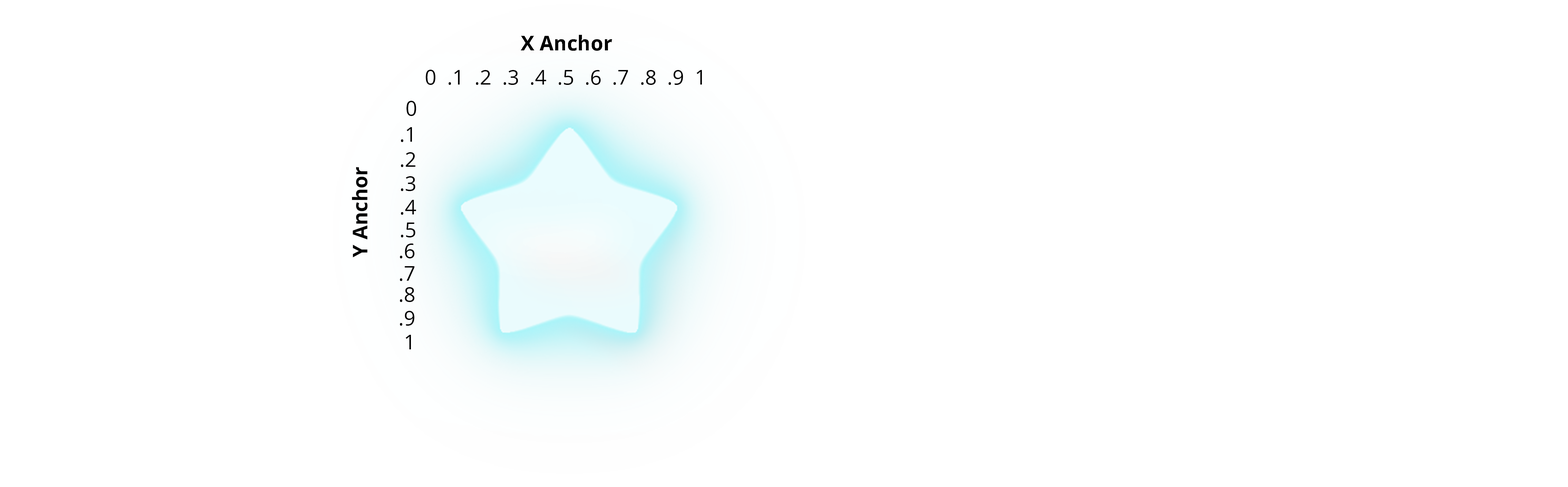
<style>
.page{position:relative;width:1568px;height:487px;background:#ffffff}
.page>*{position:absolute;margin:0}
.t1{font:20.3px "OpenSans-Bold";color:#000000}
.t2{font:20.3px "OpenSans";color:#000000}
</style>
<div class="page">
<p class="t1" style="left:521px;top:35px;width:91px;height:16px">X Anchor</p>
<p class="t2" style="left:426px;top:70px;width:276px;height:15px">0  .1  .2  .3  .4  .5  .6  .7  .8  .9  1</p>
<p class="t2" style="left:407px;top:101px;width:9px;height:15px">0</p>
<p class="t2" style="left:401px;top:127px;width:11px;height:15px">.1</p>
<p class="t2" style="left:401px;top:152px;width:15px;height:15px">.2</p>
<p class="t1" style="left:352px;top:167px;width:16px;height:90px;rotate:-90deg">Y Anchor</p>
<p class="t2" style="left:401px;top:176px;width:14px;height:15px">.3t</p>
<p class="t2" style="left:401px;top:200px;width:15px;height:15px">.4</p>
<p class="t2" style="left:401px;top:222px;width:14px;height:15px">.5</p>
<p class="t2" style="left:400px;top:243px;width:15px;height:15px">.6</p>
<p class="t2" style="left:400px;top:266px;width:15px;height:15px">.7</p>
<p class="t2" style="left:400px;top:287px;width:15px;height:15px">.8</p>
<p class="t2" style="left:400px;top:311px;width:14px;height:14px">.9</p>
<p class="t2" style="left:406px;top:335px;width:5px;height:14px">1</p>
</div>
